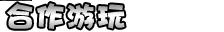
<style>
.page{position:relative;width:224px;height:32px;background:#ffffff}
.page>*{position:absolute;margin:0}
.t1{font:29px "DFPHaiBaoW12";letter-spacing:0.05em}
</style>
<div class="page">
<p class="t1" style="left:7px;top:3px;width:118px;height:26px">合作游玩</p>
</div>
